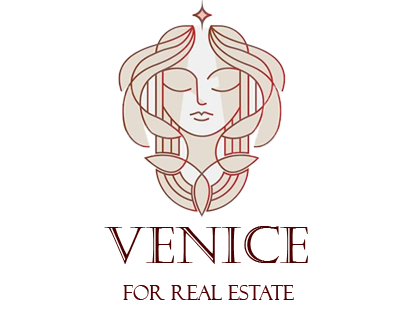
<style>
.page{position:relative;width:404px;height:316px;background:#ffffff}
.page>*{position:absolute;margin:0}
.t1{font:51px "Castellar";color:#4b0000}
.t2{font:20px "FelixTitlingMT";color:#530000}
</style>
<div class="page">
<p class="t1" style="left:104px;top:226px;width:204px;height:38px">Venice</p>
<p class="t2" style="left:123px;top:285px;width:171px;height:15px">FOR REAL ESTATE</p>
</div>
